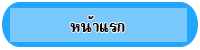
<style>
.page{position:relative;width:200px;height:50px;background:#7ac9fd}
.page>*{position:absolute;margin:0}
.t1{font:21.3px "DSNNamKang";color:#040404}
</style>
<div class="page">
<p class="t1" style="left:70px;top:16px;width:55px;height:16px">หน้าแรก</p>
</div>
